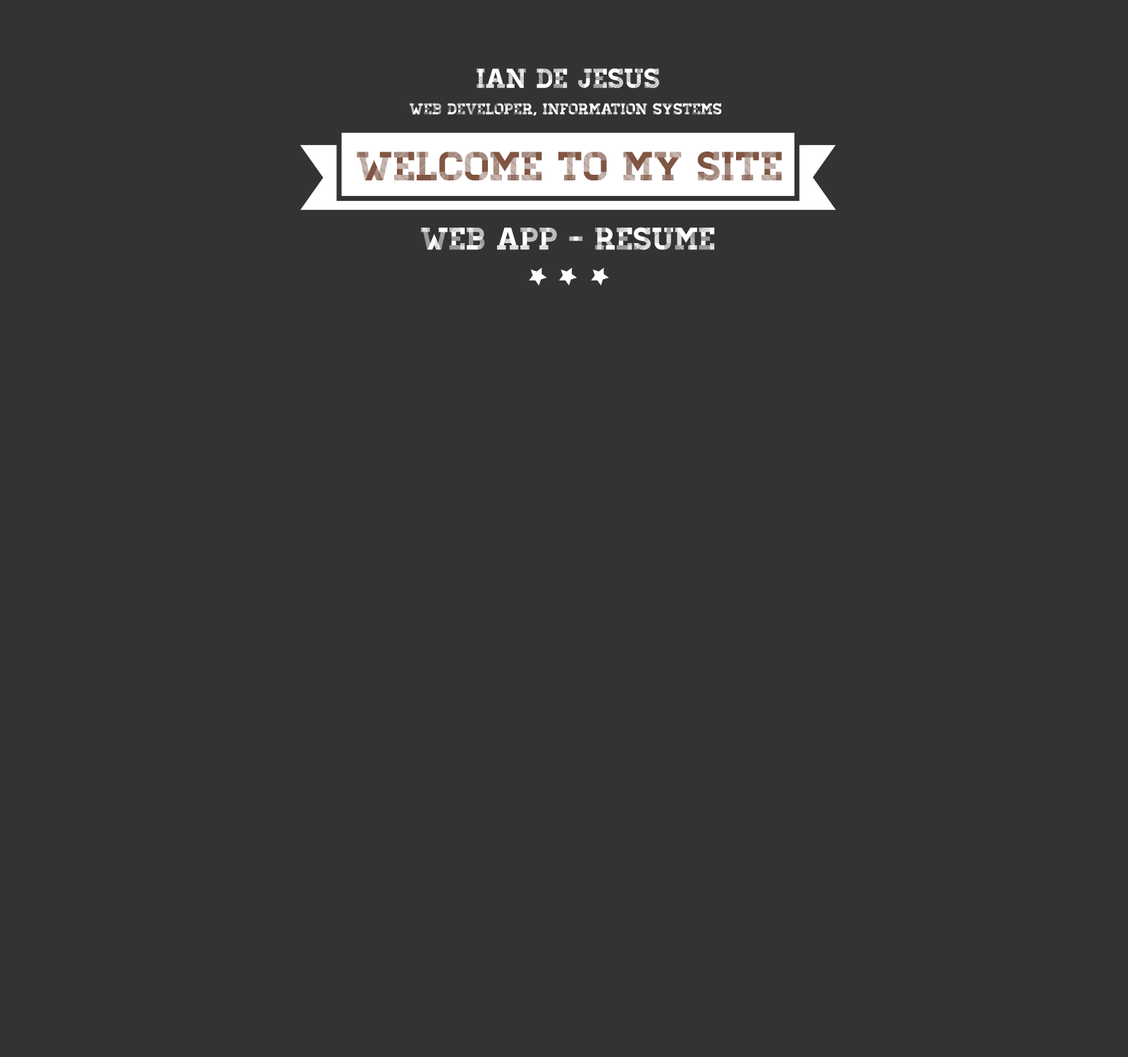
<style>
.page{position:relative;width:1128px;height:1057px;background:#333333}
.page>*{position:absolute;margin:0}
.t1{font:27.4px "Homestead-Display";color:#ffffff}
.t2{font:15.7px "Homestead-Display";color:#ffffff}
.t3{font:41px "Homestead-Display";color:#805541}
.t4{font:31.3px "Homestead-Display";color:#ffffff}
</style>
<div class="page">
<p class="t1" style="left:476px;top:68px;width:183px;height:20px">Ian De Jesus</p>
<p class="t2" style="left:410px;top:103px;width:312px;height:13px">Web Developer, Information Systems</p>
<p class="t3" style="left:357px;top:152px;width:425px;height:29px">Welcome to my site</p>
<p class="t4" style="left:421px;top:227px;width:294px;height:23px">Web App - Resume</p>
</div>
